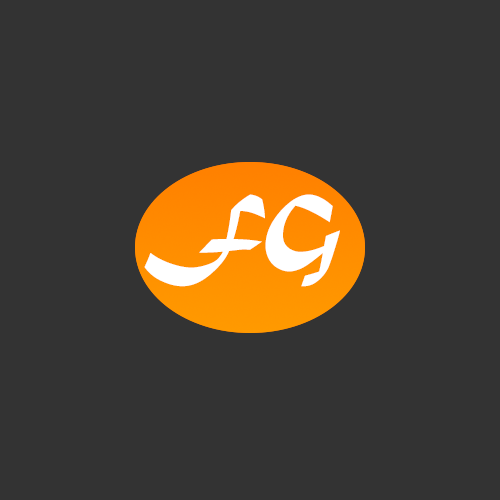
<style>
.page{position:relative;width:500px;height:500px;background:#333333}
.page>*{position:absolute;margin:0}
.t1{font:100px "MaturaMTScriptCapitals";color:#ffffff}
</style>
<div class="page">
<p class="t1" style="left:144px;top:194px;width:196px;height:93px">FG</p>
</div>
